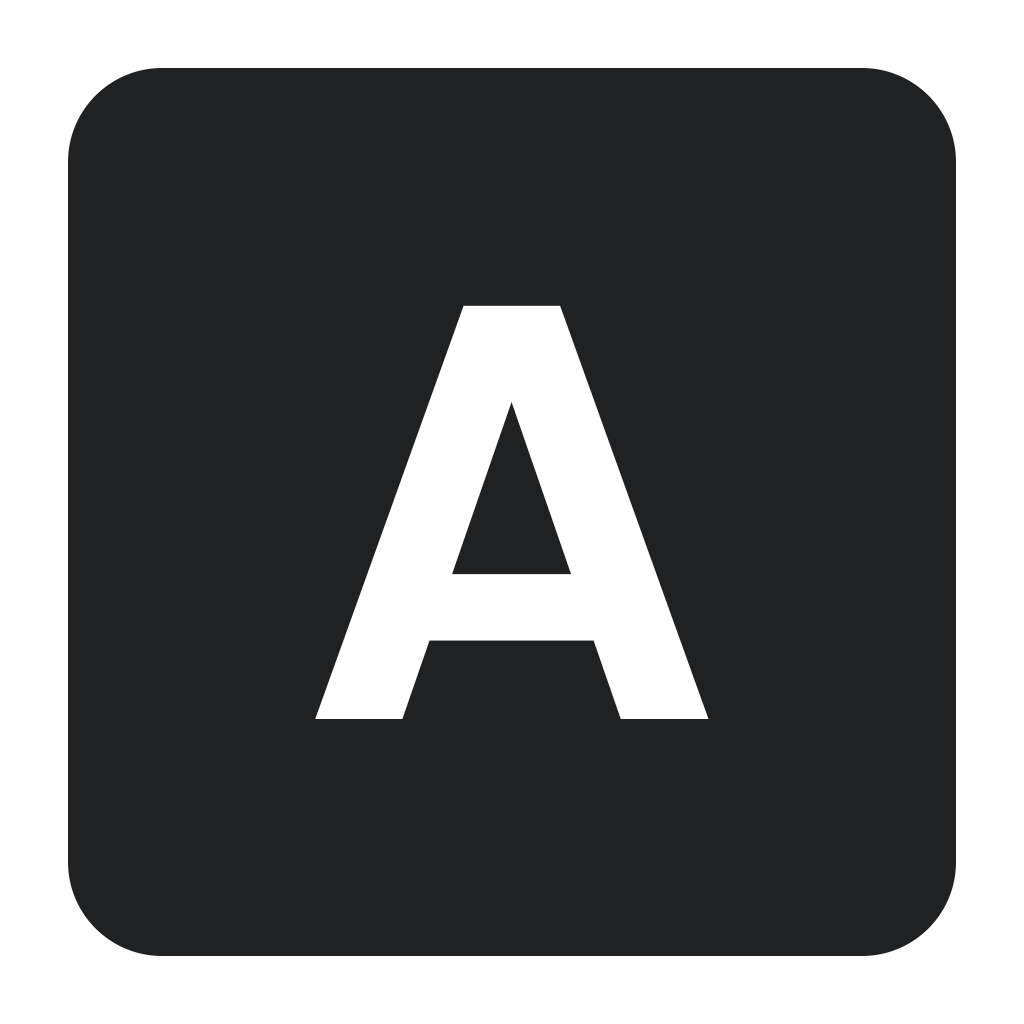
<style>
.page{position:relative;width:1024px;height:1024px;background:#202123}
.page>*{position:absolute;margin:0}
.t1{font:590.9px "Poppins-SemiBold";letter-spacing:-0.025em;color:#ffffff}
</style>
<div class="page">
<p class="t1" style="left:315px;top:305px;width:394px;height:414px">A</p>
</div>
